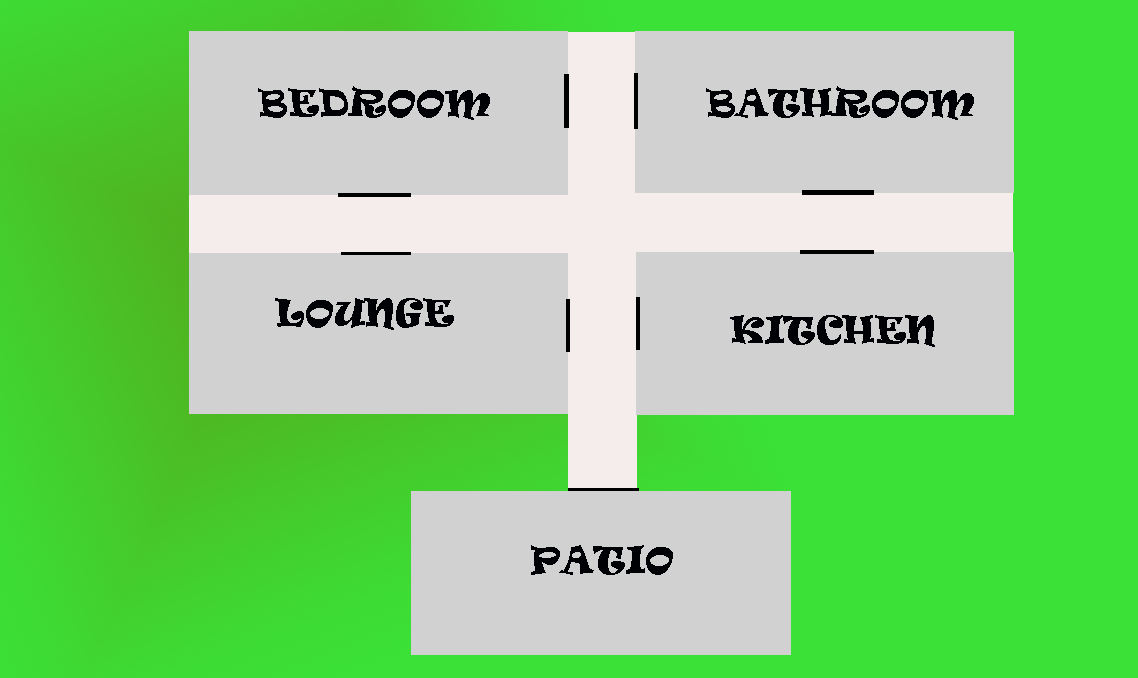
<style>
.page{position:relative;width:1138px;height:678px;background:#d1d1d1}
.page>*{position:absolute;margin:0}
.t1{font:36px "Ravie";color:#000104}
</style>
<div class="page">
<p class="t1" style="left:258px;top:86px;width:232px;height:34px">BEDROOM</p>
<p class="t1" style="left:706px;top:86px;width:268px;height:34px">BATHROOM</p>
<p class="t1" style="left:275px;top:298px;width:179px;height:32px">LOUNGE</p>
<p class="t1" style="left:730px;top:315px;width:205px;height:32px">KITCHEN</p>
<p class="t1" style="left:531px;top:545px;width:142px;height:30px">PATIO</p>
</div>
